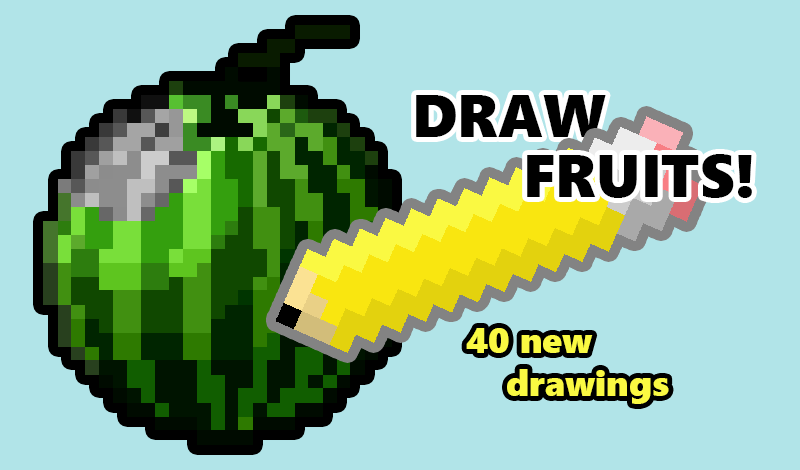
<style>
.page{position:relative;width:800px;height:470px;background:#b1e4e8}
.page>*{position:absolute;margin:0}
.t1{font:60px "SegoeUIBlack";color:#000000}
.t2{font:36px "SegoeUIBlack";color:#faf942}
</style>
<div class="page">
<p class="t1" style="left:416px;top:95px;width:190px;height:42px">DRAW</p>
<p class="t1" style="left:527px;top:154px;width:225px;height:44px">FRUITS!</p>
<p class="t2" style="left:466px;top:328px;width:203px;height:76px">40 new<br>    drawings</p>
</div>
